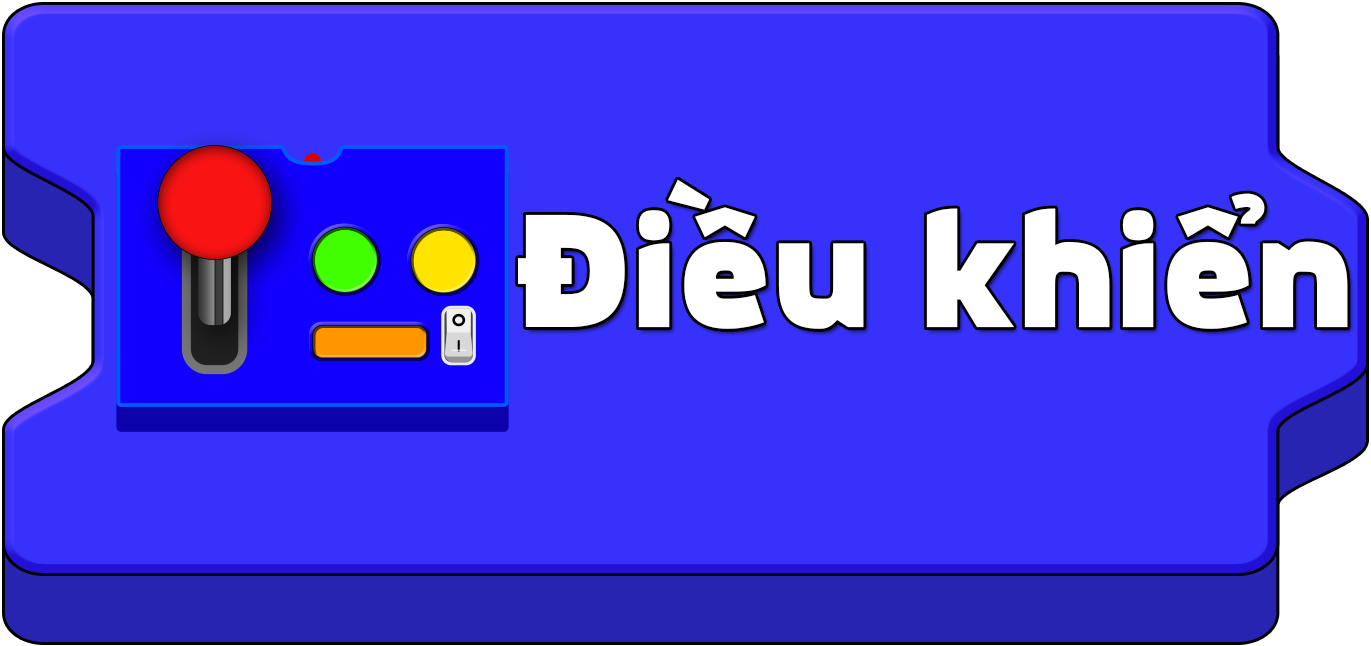
<style>
.page{position:relative;width:1371px;height:646px;background:#3732fb}
.page>*{position:absolute;margin:0}
.t1{font:157.8px "MovaviGrotesqueBlack";color:#ffffff}
</style>
<div class="page">
<p class="t1" style="left:518px;top:179px;width:830px;height:150px">Điều khiển</p>
</div>
